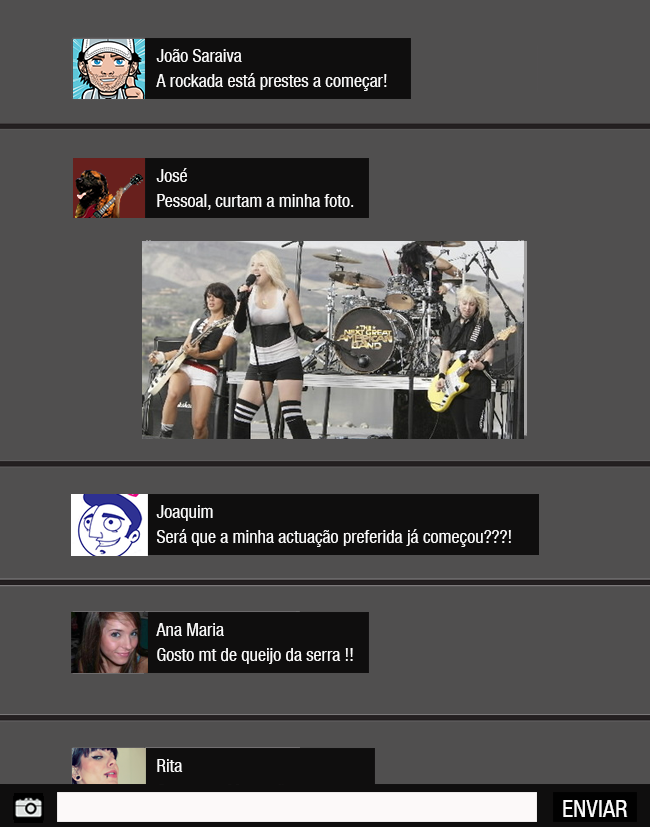
<style>
.page{position:relative;width:650px;height:827px;background:#504f4f}
.page>*{position:absolute;margin:0}
.t1{font:18px "HelveticaNeueLTCom-Cn";color:#fafafa}
.t2{font:24px "HelveticaNeueLTCom-Cn";color:#fafafa}
</style>
<div class="page">
<p class="t1" style="left:156px;top:49px;width:86px;height:13px">João Saraiva</p>
<p class="t1" style="left:156px;top:73px;width:231px;height:18px">A rockada está prestes a começar!</p>
<p class="t1" style="left:156px;top:168px;width:31px;height:14px">José</p>
<p class="t1" style="left:157px;top:194px;width:197px;height:16px">Pessoal, curtam a minha foto.</p>
<p class="t1" style="left:156px;top:505px;width:57px;height:16px">Joaquim</p>
<p class="t1" style="left:157px;top:529px;width:354px;height:18px">Será que a minha actuação preferida já começou???!</p>
<p class="t1" style="left:156px;top:623px;width:68px;height:13px">Ana Maria</p>
<p class="t1" style="left:157px;top:648px;width:196px;height:16px">Gosto mt de queijo da serra !!</p>
<p class="t1" style="left:157px;top:759px;width:26px;height:13px">Rita</p>
<p class="t2" style="left:563px;top:800px;width:65px;height:17px">ENVIAR</p>
</div>
